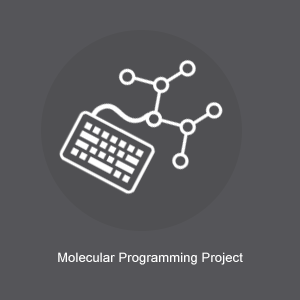
<style>
.page{position:relative;width:300px;height:300px;background:#555559}
.page>*{position:absolute;margin:0}
.t1{font:13px "ArialMT";letter-spacing:0.01em;color:#ffffff}
</style>
<div class="page">
<p class="t1" style="left:58px;top:252px;width:185px;height:13px">Molecular Programming Project</p>
</div>
